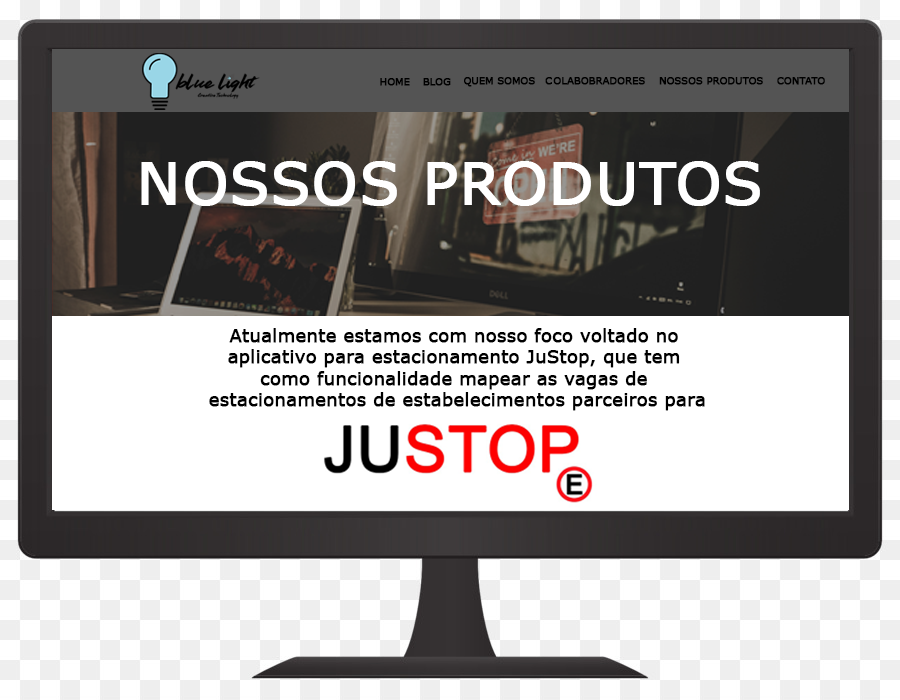
<style>
.page{position:relative;width:900px;height:700px;background:#ffffff}
.page>*{position:absolute;margin:0}
.t1{font:9.7px "Verdana";color:#000000;text-transform:uppercase;font-weight:bold}
.t2{font:58.2px "Verdana";color:#ffffff;font-weight:bold}
.t3{font:17.8px "Verdana";color:#000000;font-weight:bold}
</style>
<div class="page">
<p class="t1" style="left:380px;top:78px;width:30px;height:8px">home</p>
<p class="t1" style="left:423px;top:78px;width:28px;height:8px">BLOG</p>
<p class="t1" style="left:464px;top:77px;width:71px;height:10px">Quem somos</p>
<p class="t1" style="left:545px;top:77px;width:100px;height:8px">c olabobradores</p>
<p class="t1" style="left:659px;top:77px;width:104px;height:8px">nossos produtos</p>
<p class="t1" style="left:777px;top:77px;width:48px;height:8px">CONTATO</p>
<p class="t2" style="left:141px;top:161px;width:619px;height:45px">NOSSOS PRODUTOS</p>
<p class="t3" style="left:209px;top:328px;width:496px;height:83px;text-align:center">Atualmente estamos com nosso foco voltado no <br>aplicativo para estacionamento JuStop, que tem <br>como funcionalidade mapear as vagas de <br>estacionamentos de estabelecimentos parceiros para</p>
</div>
